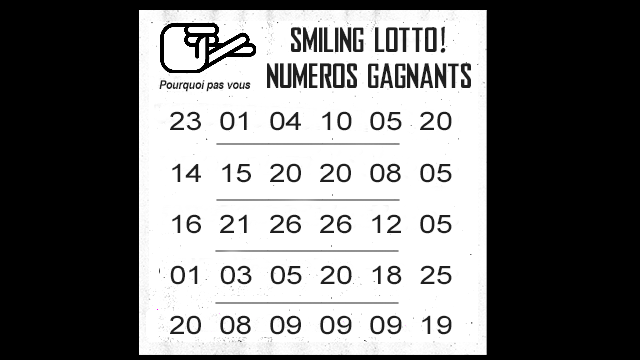
<style>
.page{position:relative;width:640px;height:360px;background:#000000}
.page>*{position:absolute;margin:0}
.t1{font:35.3px "NikeBureau";color:#1f1f1f;scale:1.07 1}
.t2{font:35.3px "GentiumBasic";color:#1f1f1f;scale:1.07 1}
.t3{font:12px "Arial-BoldItalicMT";letter-spacing:-0.02em;color:#1f1f1f;scale:0.88 1}
.t4{font:25.5px "ArialMT";color:#1f1f1f;scale:1.18 1}
</style>
<div class="page">
<p class="t1" style="left:291px;top:26px;width:155px;height:27px">SMILING LOTTO<span class="t2">!</span></p>
<p class="t1" style="left:267px;top:63px;width:204px;height:25px">NUMEROS GAGNANTS</p>
<p class="t3" style="left:159px;top:80px;width:92px;height:12px">Pourquoi pas vous</p>
<p class="t4" style="left:170px;top:111px;width:282px;height:20px">23  01  04  10  05  20</p>
<p class="t4" style="left:172px;top:163px;width:280px;height:20px">14  15  20  20  08  05</p>
<p class="t4" style="left:172px;top:214px;width:280px;height:20px">16  21  26  26  12  05</p>
<p class="t4" style="left:170px;top:265px;width:282px;height:20px">01  03  05  20  18  25</p>
<p class="t4" style="left:170px;top:315px;width:282px;height:20px">20  08  09  09  09  19</p>
</div>
